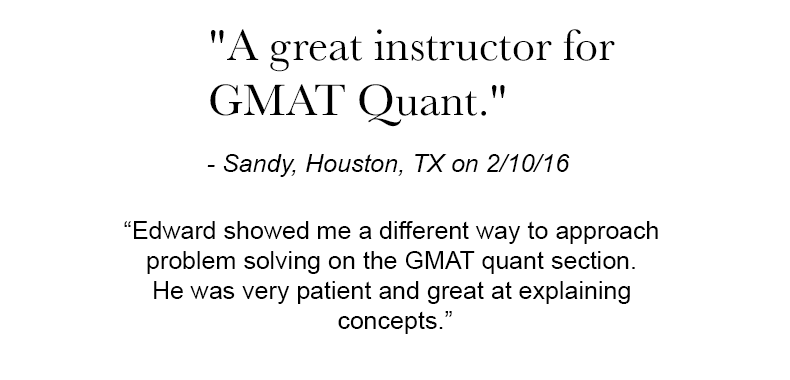
<style>
.page{position:relative;width:790px;height:380px;background:#ffffff}
.page>*{position:absolute;margin:0}
.t1{font:45.8px "Baskerville";color:#000000}
.t2{font:25px "Arial-ItalicMT";color:#000000}
.t3{font:25px "ArialMT";color:#000000}
</style>
<div class="page">
<p class="t1" style="left:210px;top:29px;width:405px;height:98px">"A great instructor for <br>GMAT Quant."</p>
<p class="t2" style="left:207px;top:154px;width:363px;height:23px">- Sandy, Houston, TX on 2/10/16</p>
<p class="t3" style="left:124px;top:221px;width:534px;height:113px;text-align:center">“Edward showed me a different way to approach <br>problem solving on the GMAT quant section. <br>He was very patient and great at explaining <br>concepts.”</p>
</div>
